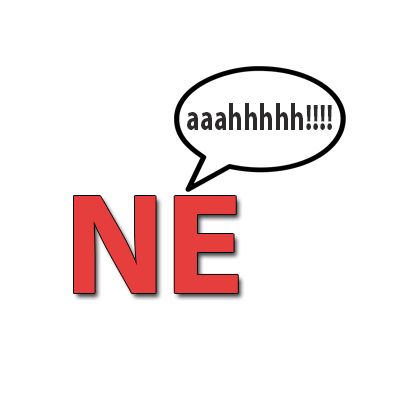
<style>
.page{position:relative;width:400px;height:400px;background:#ffffff}
.page>*{position:absolute;margin:0}
.t1{font:36.8px "MyriadPro-Bold";color:#2c2a2a;scale:0.72 1}
.t2{font:144.4px "MyriadPro-Bold";color:#e63d3d}
</style>
<div class="page">
<p class="t1" style="left:187px;top:103px;width:145px;height:27px">aaahhhhh!!!!</p>
<p class="t2" style="left:74px;top:196px;width:164px;height:97px">NE</p>
</div>
